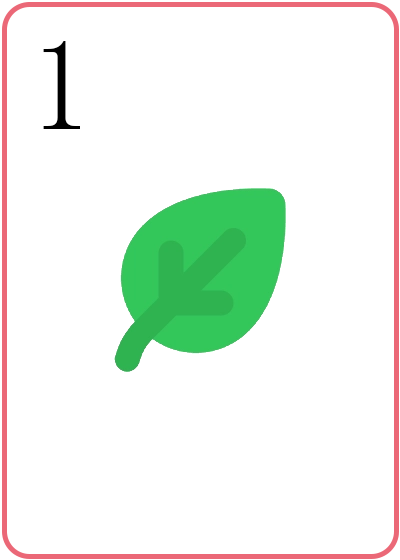
<style>
.page{position:relative;width:400px;height:560px;background:#ffffff}
.page>*{position:absolute;margin:0}
.t1{font:128px "NSimSun";color:#000000}
</style>
<div class="page">
<p class="t1" style="left:43px;top:41px;width:37px;height:88px">1</p>
</div>
